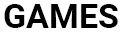
<style>
.page{position:relative;width:128px;height:32px;background:#ffffff}
.page>*{position:absolute;margin:0}
.t1{font:34px "Roboto-Bold";color:#000000}
</style>
<div class="page">
<p class="t1" style="left:4px;top:4px;width:114px;height:24px">GAMES</p>
</div>
